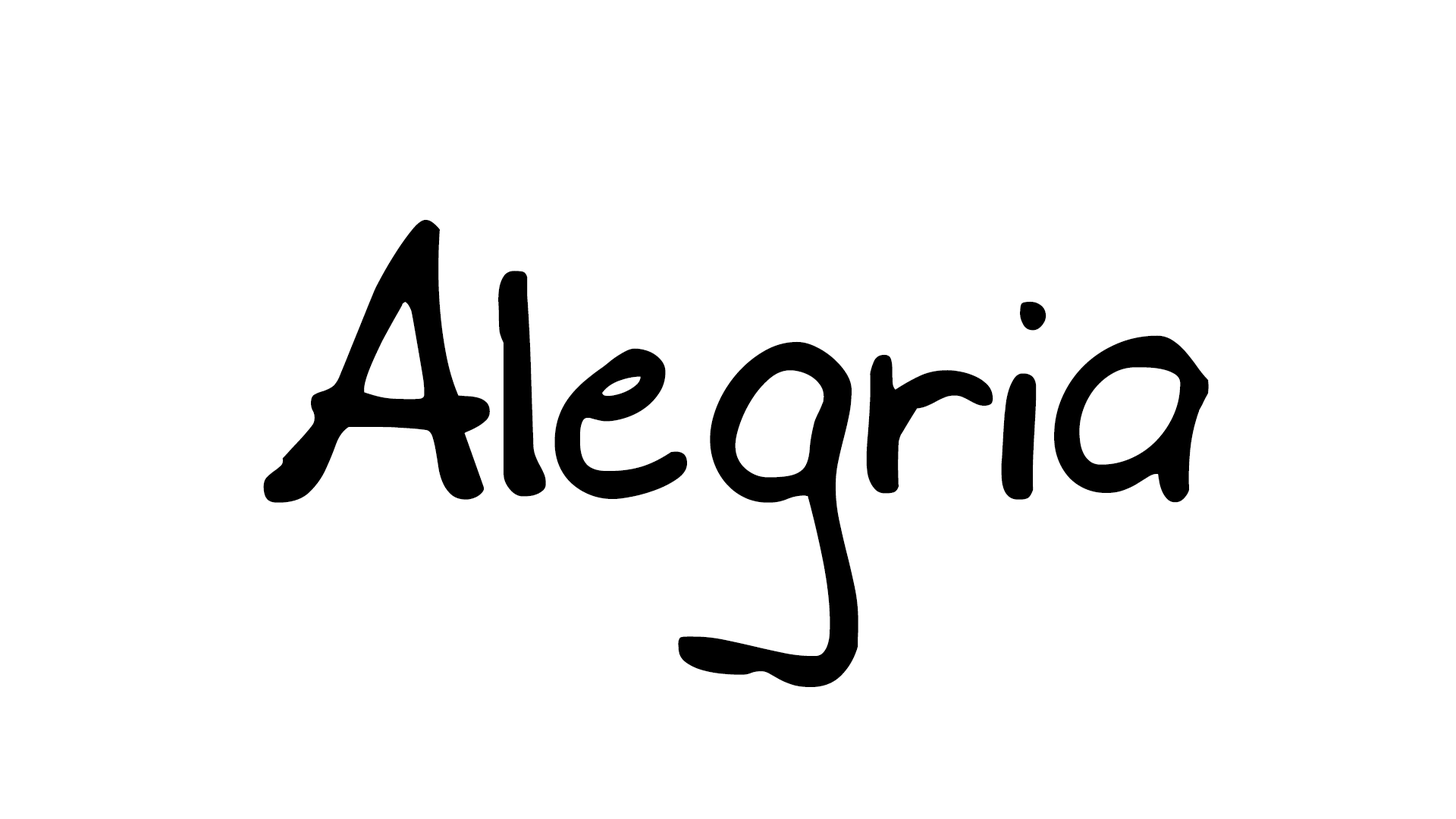
<style>
.page{position:relative;width:1456px;height:819px;background:#ffffff}
.page>*{position:absolute;margin:0}
.t1{font:442.4px "Mad'sScrawl-BRK-";color:#000000}
</style>
<div class="page">
<p class="t1" style="left:263px;top:219px;width:946px;height:468px">Alegria</p>
</div>
